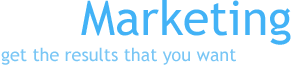
<style>
.page{position:relative;width:292px;height:65px;background:#ffffff}
.page>*{position:absolute;margin:0}
.t1{font:48px "TrebuchetMS";color:#42b2f6}
.t2{font:48px "TrebuchetMS";color:#ffffff}
.t3{font:18px "TrebuchetMS";color:#79c6f5}
</style>
<div class="page">
<p class="t1" style="left:2px;top:0px;width:289px;height:45px"><span class="t2">SEO</span>Marketing</p>
<p class="t3" style="left:1px;top:47px;width:235px;height:18px">get the results that you want</p>
</div>
